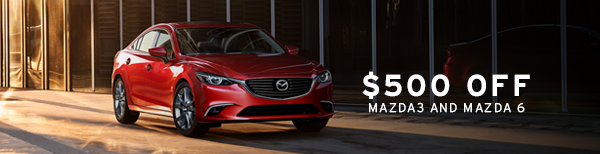
<style>
.page{position:relative;width:600px;height:154px}
.page>*{position:absolute;margin:0}
.t1{font:30.2px "Interstate-Bold";letter-spacing:0.1em;color:#ffffff}
.t2{font:12.6px "Interstate-Light";letter-spacing:0.1em;color:#ffffff}
</style>
<div class="page">
<p class="t1" style="left:362px;top:71px;width:168px;height:28px">$500 OFF</p>
<p class="t2" style="left:369px;top:102px;width:156px;height:11px">MAZDA3 AND MAZDA 6</p>
</div>
